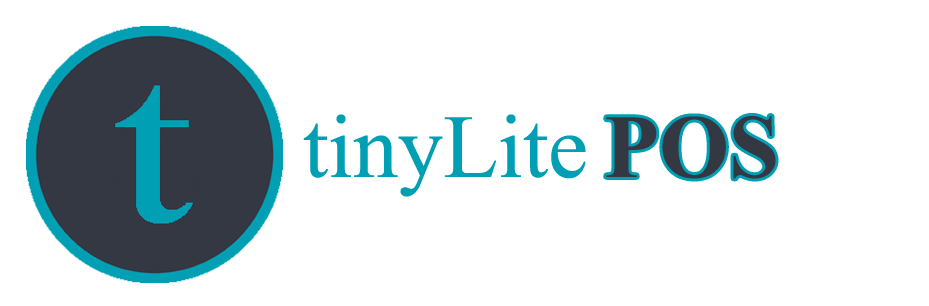
<style>
.page{position:relative;width:929px;height:306px;background:#ffffff}
.page>*{position:absolute;margin:0}
.t1{font:90px "TimesNewRomanPSMT";color:#009fb3}
.t2{font:90px "TimesNewRomanPS-BoldMT";color:#343843}
</style>
<div class="page">
<p class="t1" style="left:303px;top:114px;width:283px;height:83px">tinyLite</p>
<p class="t2" style="left:606px;top:116px;width:170px;height:63px">POS</p>
</div>
